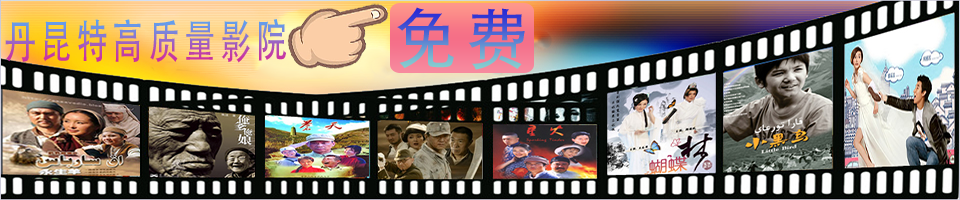
<style>
.page{position:relative;width:960px;height:200px}
.page>*{position:absolute;margin:0}
.t1{font:67.8px "AdobeHeitiStd-Regular";letter-spacing:0.15em;scale:0.92 1}
.t2{font:45.9px "AdobeHeitiStd-Regular";letter-spacing:0.15em;scale:0.68 1}
</style>
<div class="page">
<p class="t1" style="left:397px;top:7px;width:128px;height:63px">免费</p>
<p class="t2" style="left:5px;top:19px;width:281px;height:44px">丹昆特高质量影院</p>
</div>
